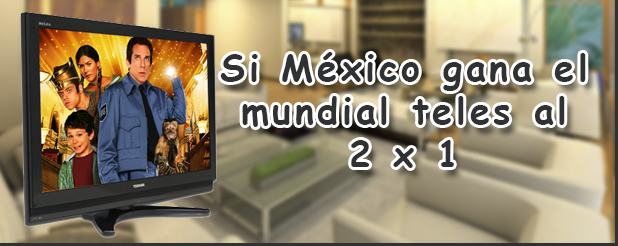
<style>
.page{position:relative;width:618px;height:246px}
.page>*{position:absolute;margin:0}
.t1{font:36px "ComicSansMS-Bold";letter-spacing:0.1em;color:#303133}
</style>
<div class="page">
<p class="t1" style="left:220px;top:52px;width:366px;height:116px;text-align:center">Si México gana el mundial teles al<br>2 x 1</p>
</div>
